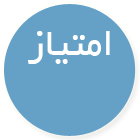
<style>
.page{position:relative;width:140px;height:140px;background:#65a1c6}
.page>*{position:absolute;margin:0}
.t1{font:42px "BYekan";color:#ffffff}
</style>
<div class="page">
<p class="t1" style="left:27px;top:31px;width:83px;height:33px">امتیاز</p>
</div>
